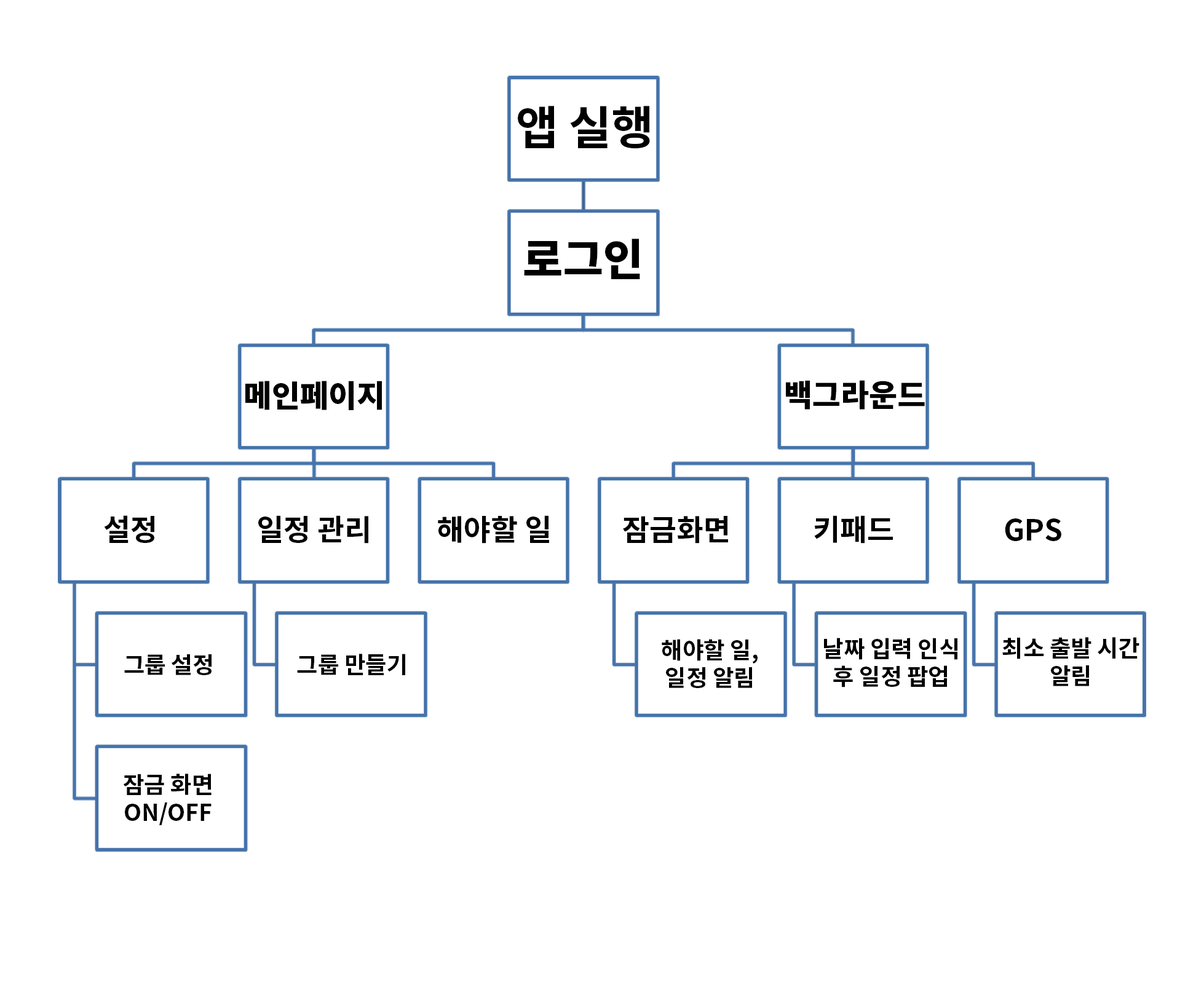
<style>
.page{position:relative;width:1204px;height:990px;background:#ffffff}
.page>*{position:absolute;margin:0}
.t1{font:46.1px "NotoSansCJKkr-Bold";color:#000000}
.t2{font:43.6px "NotoSansCJKkr-Black";color:#000000}
.t3{font:30.8px "NotoSansCJKkr-Black";color:#000000}
.t4{font:29.5px "NotoSansCJKkr-Bold";color:#000000}
.t5{font:23.1px "NotoSansCJKkr-Bold";color:#000000}
</style>
<div class="page">
<p class="t1" style="left:518px;top:106px;width:132px;height:43px">앱 실행</p>
<p class="t2" style="left:524px;top:239px;width:116px;height:40px">로그인</p>
<p class="t3" style="left:245px;top:381px;width:137px;height:29px">메인페이지</p>
<p class="t3" style="left:786px;top:380px;width:139px;height:30px">백그라운드</p>
<p class="t4" style="left:104px;top:515px;width:50px;height:28px">설정</p>
<p class="t4" style="left:258px;top:515px;width:110px;height:29px">일정 관리</p>
<p class="t4" style="left:438px;top:515px;width:111px;height:29px">해야할 일</p>
<p class="t4" style="left:623px;top:516px;width:105px;height:28px">잠금화면</p>
<p class="t4" style="left:814px;top:515px;width:79px;height:29px">키패드</p>
<p class="t4" style="left:1005px;top:518px;width:57px;height:23px">GPS</p>
<p class="t5" style="left:662px;top:639px;width:96px;height:49px;text-align:center">해야할 일,<br>일정 알림</p>
<p class="t5" style="left:824px;top:638px;width:134px;height:50px;text-align:center">날짜 입력 인식<br>후 일정 팝업</p>
<p class="t5" style="left:1003px;top:637px;width:137px;height:49px;text-align:center">최소 출발 시간<br>알림</p>
<p class="t5" style="left:297px;top:654px;width:108px;height:21px">그룹 만들기</p>
<p class="t5" style="left:124px;top:654px;width:88px;height:21px">그룹 설정</p>
<p class="t5" style="left:123px;top:774px;width:89px;height:51px;text-align:center">잠금 화면<br>ON/OFF</p>
</div>
